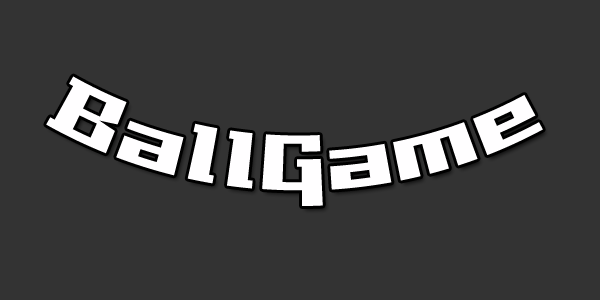
<style>
.page{position:relative;width:600px;height:300px;background:#333333}
.page>*{position:absolute;margin:0}
.t1{font:100px "Millennia";color:#fffeff}
</style>
<div class="page">
<p class="t1" style="left:46px;top:76px;width:497px;height:130px">BallGame</p>
</div>
